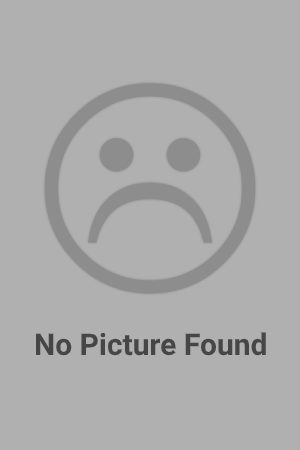
<style>
.page{position:relative;width:300px;height:450px;background:#b0b0b0}
.page>*{position:absolute;margin:0}
.t1{font:30px "Roboto-Bold";color:#464646}
</style>
<div class="page">
<p class="t1" style="left:35px;top:332px;width:231px;height:24px">No Picture Found</p>
</div>
